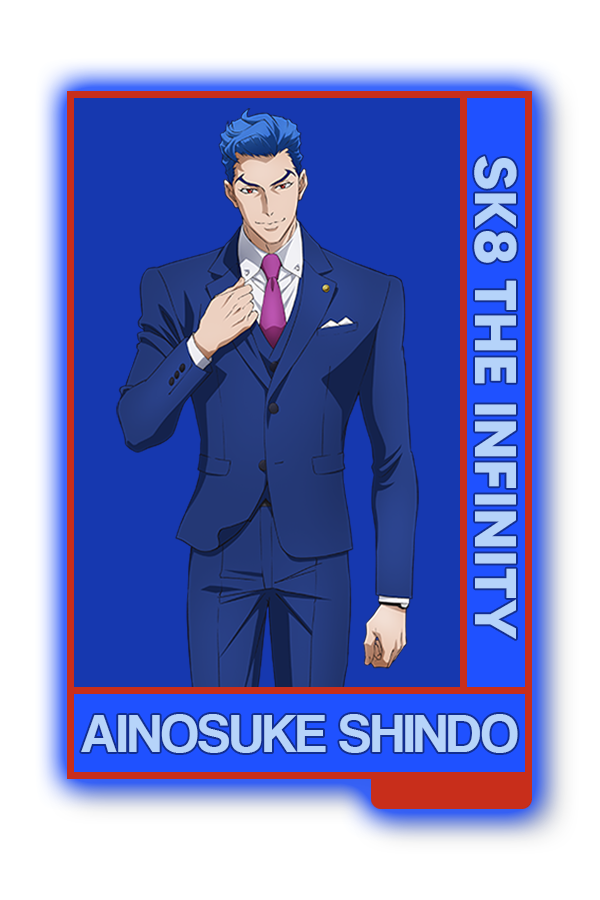
<style>
.page{position:relative;width:600px;height:900px;background:#1638af}
.page>*{position:absolute;margin:0}
.t1{font:58.4px "MADETOMMY-Bold";color:#b5d3fa}
.t2{font:55.9px "CoolveticaRg-Regular";color:#b6d4fa}
</style>
<div class="page">
<p class="t1" style="left:474px;top:156px;width:43px;height:483px;rotate:90deg">SK8 THE INFINITY</p>
<p class="t2" style="left:81px;top:714px;width:437px;height:39px">AINOSUKE SHINDO</p>
</div>
